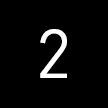
<style>
.page{position:relative;width:108px;height:108px;background:#000000}
.page>*{position:absolute;margin:0}
.t1{font:72px "OratorStd";color:#ffffff}
</style>
<div class="page">
<p class="t1" style="left:40px;top:29px;width:27px;height:49px">2</p>
</div>
